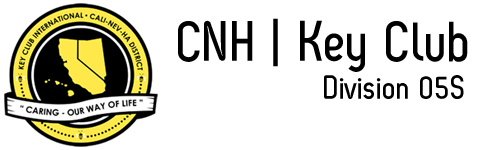
<style>
.page{position:relative;width:482px;height:150px;background:#ffffff}
.page>*{position:absolute;margin:0}
.t1{font:56.9px "ZagBold";color:#000000}
.t2{font:33.4px "ZagBold";color:#000000}
</style>
<div class="page">
<p class="t1" style="left:178px;top:18px;width:290px;height:54px">CNH | Key Club</p>
<p class="t2" style="left:324px;top:75px;width:140px;height:24px">Division 05S</p>
</div>
